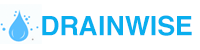
<style>
.page{position:relative;width:200px;height:50px;background:#ffffff}
.page>*{position:absolute;margin:0}
.t1{font:26.7px "Helvetica-Bold";color:#09aeee}
</style>
<div class="page">
<p class="t1" style="left:42px;top:15px;width:150px;height:21px">DRAINWISE</p>
</div>
